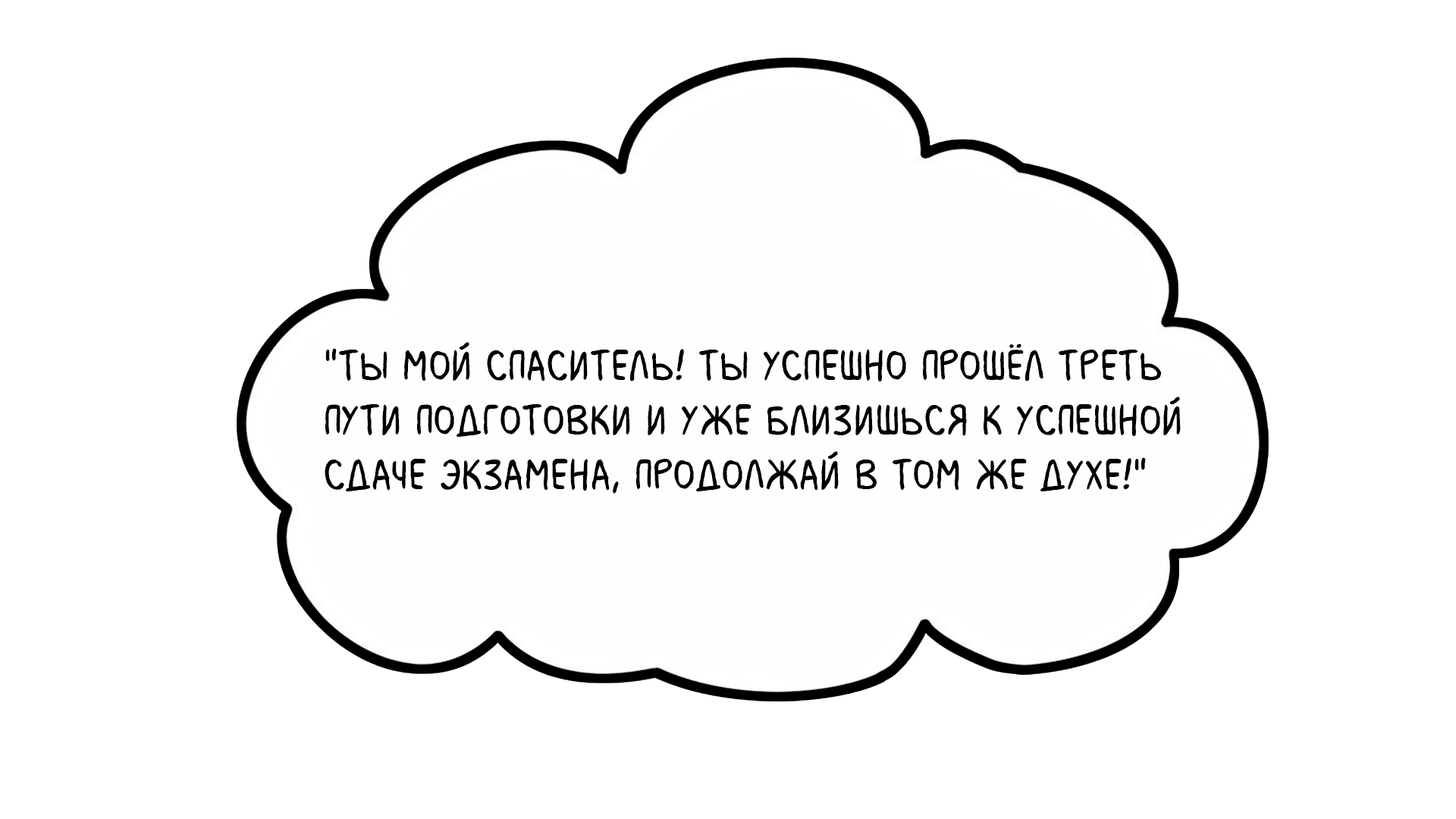
<style>
.page{position:relative;width:1456px;height:819px;background:#ffffff}
.page>*{position:absolute;margin:0}
.t1{font:45.5px "MilkMustacheBB";color:#000000}
</style>
<div class="page">
<p class="t1" style="left:325px;top:342px;width:856px;height:152px">"Ты мой спаситель! Ты успешно прошёл треть <br>пути подготовки и уже близишься к успешной <br>сдаче экзамена, продолжай в том же духе!"</p>
</div>
